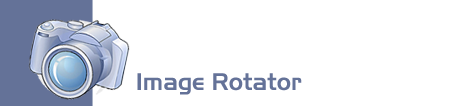
<style>
.page{position:relative;width:453px;height:106px;background:#ffffff}
.page>*{position:absolute;margin:0}
.t1{font:24px "Slicker";color:#647298}
</style>
<div class="page">
<p class="t1" style="left:137px;top:73px;width:165px;height:22px">Image Rotator</p>
</div>
